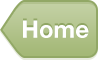
<style>
.page{position:relative;width:98px;height:60px}
.page>*{position:absolute;margin:0}
.t1{font:23.9px "HelveticaNeue-Bold";color:#ffffff}
</style>
<div class="page">
<p class="t1" style="left:23px;top:20px;width:66px;height:18px">Home</p>
</div>
